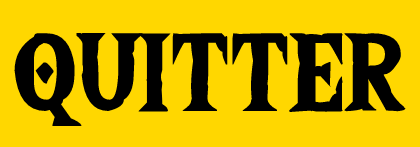
<style>
.page{position:relative;width:420px;height:147px;background:#ffd700}
.page>*{position:absolute;margin:0}
.t1{font:111px "TheWildBreathofZelda";color:#000000}
</style>
<div class="page">
<p class="t1" style="left:14px;top:33px;width:392px;height:93px">QUITTER</p>
</div>
